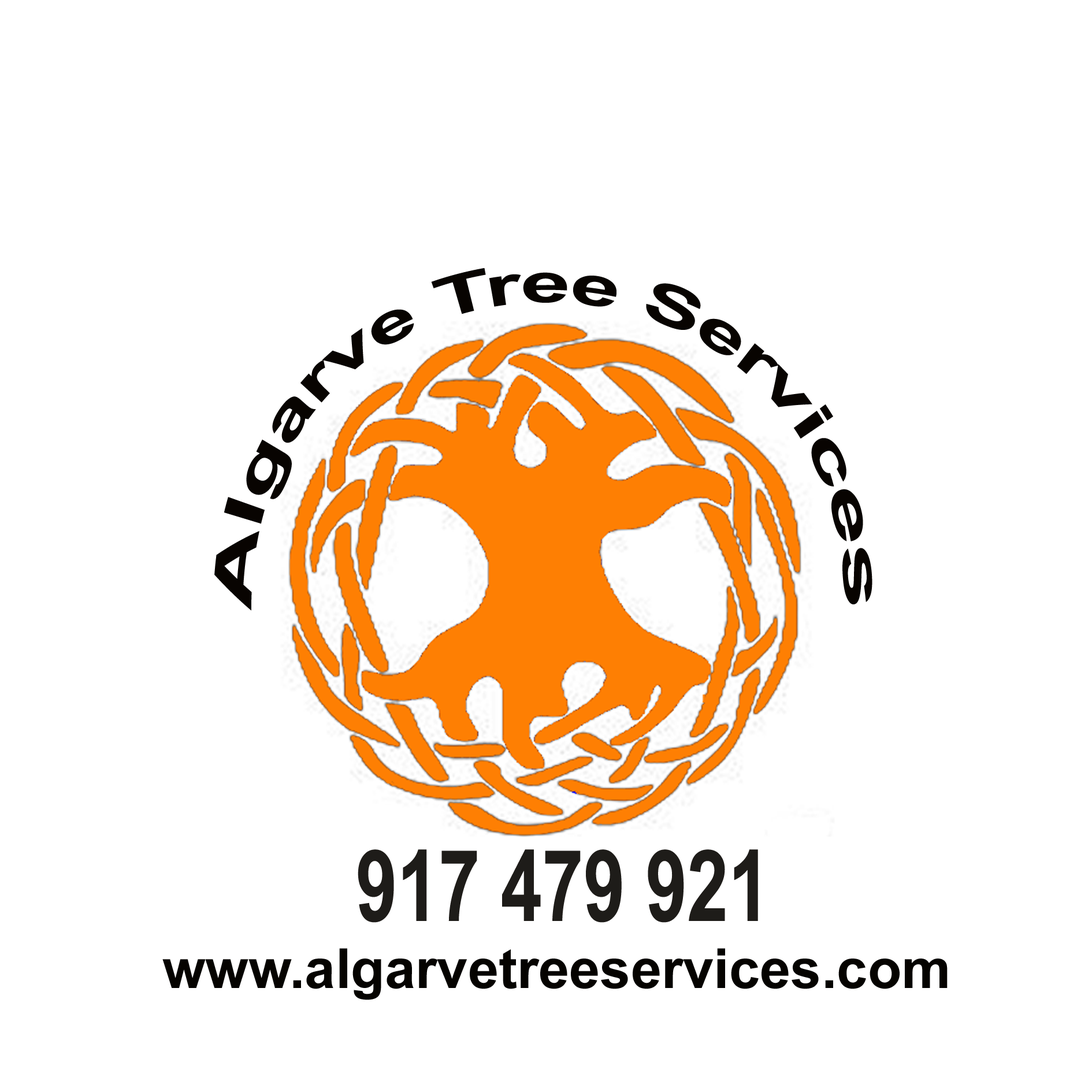
<style>
.page{position:relative;width:1092px;height:1092px;background:#ffffff}
.page>*{position:absolute;margin:0}
.t1{font:55.3px "Arial-BoldMT";color:#080401;scale:0.96 1}
.t2{font:99.3px "Arial-BoldMT";color:#1e1c19;scale:0.75 1}
.t3{font:55.3px "Arial-BoldMT";color:#050300}
</style>
<div class="page">
<p class="t1" style="left:214px;top:268px;width:658px;height:343px;text-align:center">Algarve Tree Services</p>
<p class="t2" style="left:358px;top:849px;width:400px;height:74px">917 479 921</p>
<p class="t3" style="left:162px;top:948px;width:786px;height:52px">www.algarvetreeservices.com</p>
</div>
